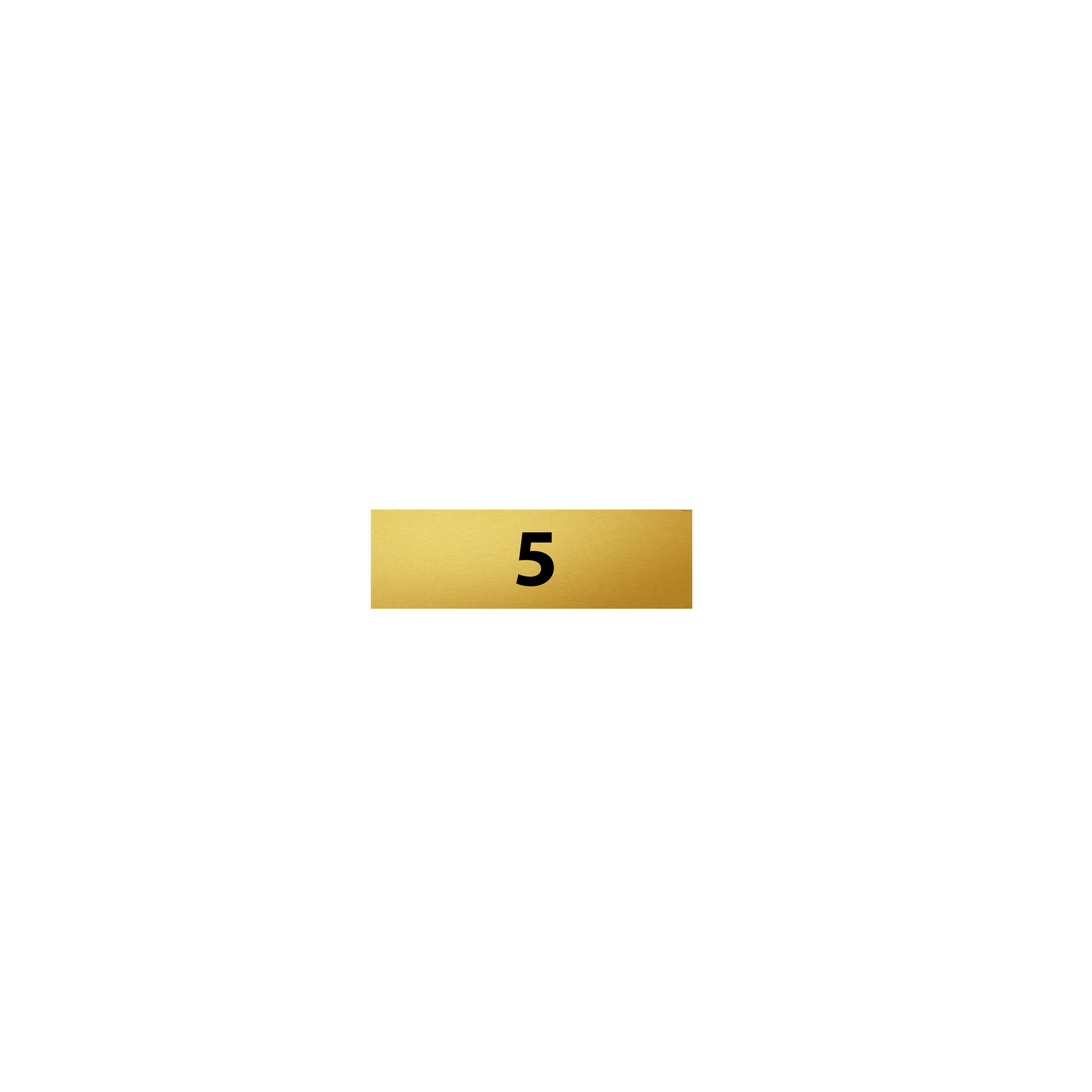
<style>
.page{position:relative;width:1092px;height:1092px;background:#ffffff}
.page>*{position:absolute;margin:0}
.t1{font:81.9px "MyriadPro-Bold";color:#000000}
</style>
<div class="page">
<p class="t1" style="left:516px;top:532px;width:38px;height:54px">5</p>
</div>
